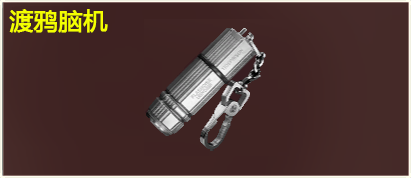
<style>
.page{position:relative;width:411px;height:178px}
.page>*{position:absolute;margin:0}
.t1{font:24px "MicrosoftYaHeiUI";color:#f4ff00;font-weight:bold}
</style>
<div class="page">
<p class="t1" style="left:9px;top:9px;width:99px;height:24px">渡鸦脑机</p>
</div>
